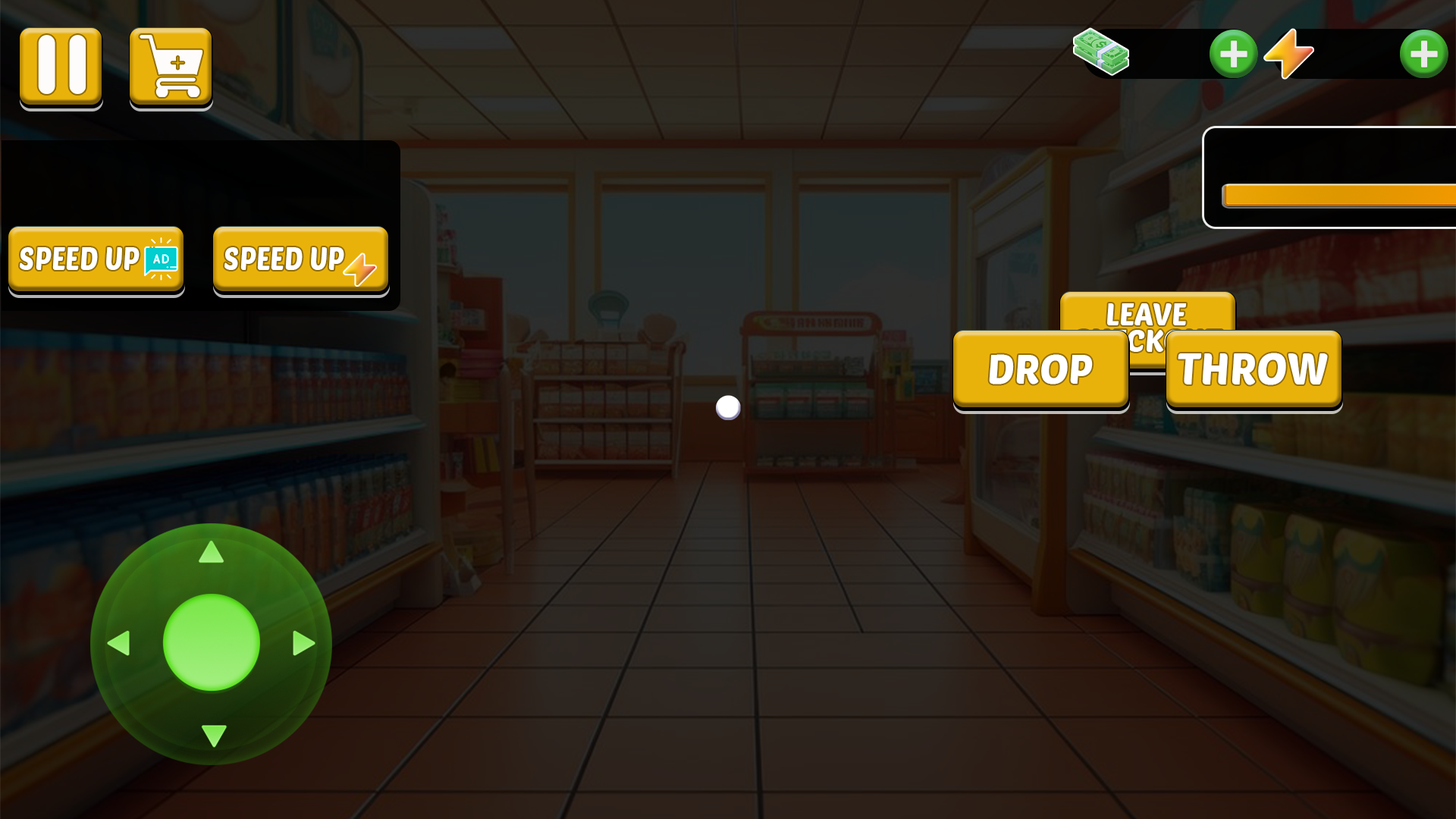
<style>
.page{position:relative;width:1456px;height:819px}
.page>*{position:absolute;margin:0}
.t1{font:31.2px "PoetsenOne-Regular";color:#ffffff;scale:0.91 1}
.t2{font:30.3px/26.4px "PoetsenOne-Regular"}
.t3{font:43.3px "PoetsenOne-Regular";color:#ffffff}
.t4{font:40.9px "PoetsenOne-Regular";color:#ffffff}
</style>
<div class="page">
<p class="t1" style="left:20px;top:247px;width:120px;height:23px">SPEED UP</p>
<p class="t1" style="left:224px;top:247px;width:120px;height:23px">SPEED UP</p>
<p class="t2" style="left:1073px;top:303px;width:149px;height:49px;text-align:center">LEAVE<br>CHECKOUT</p>
<p class="t3" style="left:1178px;top:353px;width:150px;height:32px">THROW</p>
<p class="t4" style="left:989px;top:354px;width:104px;height:30px">DROP</p>
</div>
